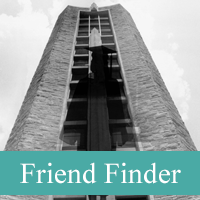
<style>
.page{position:relative;width:200px;height:200px}
.page>*{position:absolute;margin:0}
.t1{font:29px "TimesNewRomanPSMT";color:#ffffff}
</style>
<div class="page">
<p class="t1" style="left:20px;top:162px;width:161px;height:22px">Friend Finder</p>
</div>
